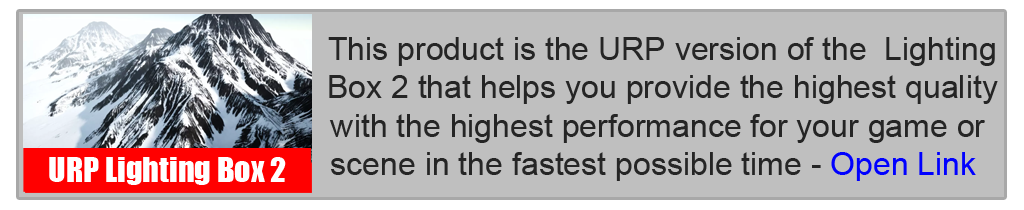
<style>
.page{position:relative;width:1024px;height:210px;background:#bfbfbf}
.page>*{position:absolute;margin:0}
.t1{font:32px "ArialMT";color:#252525}
.t2{font:32px "ArialMT";color:#0000ff}
.t3{font:32px "Impact";color:#ffffff}
</style>
<div class="page">
<p class="t1" style="left:328px;top:37px;width:670px;height:144px;text-align:center">This product is the URP version of the  Lighting <br>Box 2 that helps you provide the highest quality <br>with the highest performance for your game or<br> scene in the fastest possible time - <span class="t2">Open Link</span></p>
<p class="t3" style="left:49px;top:157px;width:237px;height:28px">URP Lighting Box 2</p>
</div>
